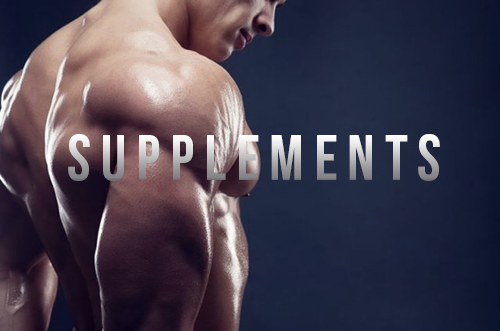
<style>
.page{position:relative;width:500px;height:331px}
.page>*{position:absolute;margin:0}
.t1{font:64px "BebasNeue"}
</style>
<div class="page">
<p class="t1" style="left:68px;top:134px;width:372px;height:47px">s u p p l e m e n t s</p>
</div>
